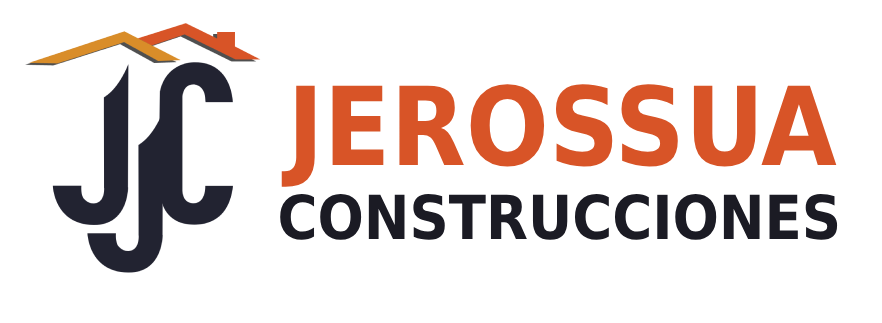
<style>
.page{position:relative;width:882px;height:323px;background:#ffffff}
.page>*{position:absolute;margin:0}
.t1{font:108.7px "DejaVuSansCondensed-Bold";color:#d85427}
.t2{font:60.6px "DejaVuSansCondensed-Bold";color:#1b1b24}
</style>
<div class="page">
<p class="t1" style="left:281px;top:84px;width:556px;height:103px">JEROSSUA</p>
<p class="t2" style="left:280px;top:194px;width:558px;height:46px">CONSTRUCCIONES</p>
</div>
